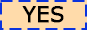
<style>
.page{position:relative;width:87px;height:30px;background:#ffdbaa}
.page>*{position:absolute;margin:0}
.t1{font:21px "Verdana";color:#000000;font-weight:bold}
</style>
<div class="page">
<p class="t1" style="left:22px;top:6px;width:42px;height:17px">YES</p>
</div>
